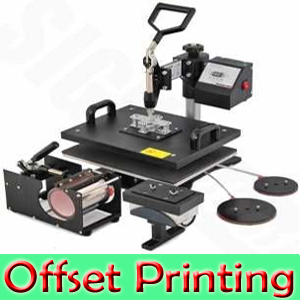
<style>
.page{position:relative;width:300px;height:300px;background:#fefefe}
.page>*{position:absolute;margin:0}
.t1{font:44.6px "BerlinSansFB-Reg";scale:1.09 1}
</style>
<div class="page">
<p class="t1" style="left:4px;top:260px;width:290px;height:38px">Offset Printing</p>
</div>
